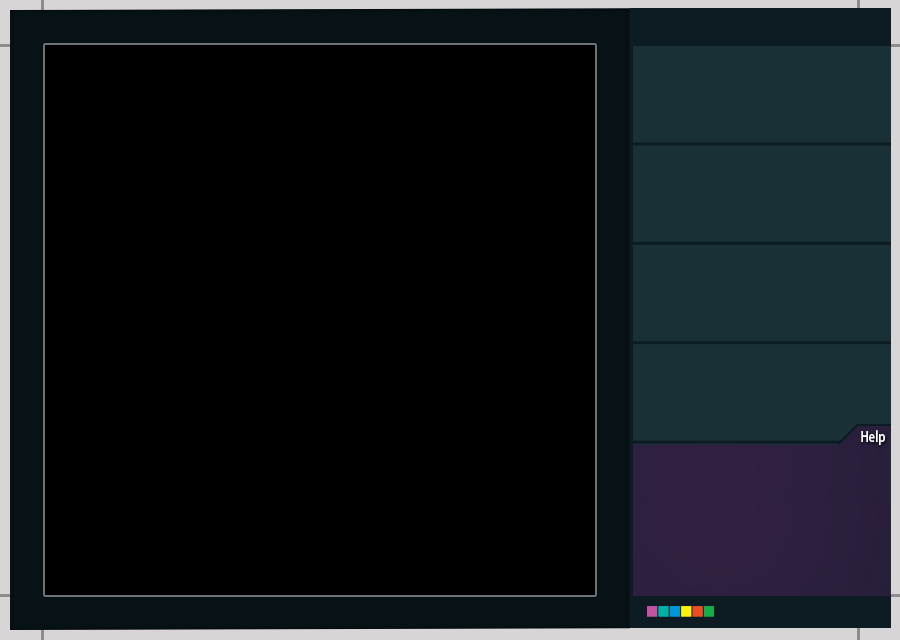
<style>
.page{position:relative;width:900px;height:640px;background:#000000}
.page>*{position:absolute;margin:0}
.t1{font:14.3px "AdobeHeitiStd-Regular";color:#ffffff;scale:0.81 1}
</style>
<div class="page">
<p class="t1" style="left:861px;top:430px;width:24px;height:15px">Help</p>
</div>
